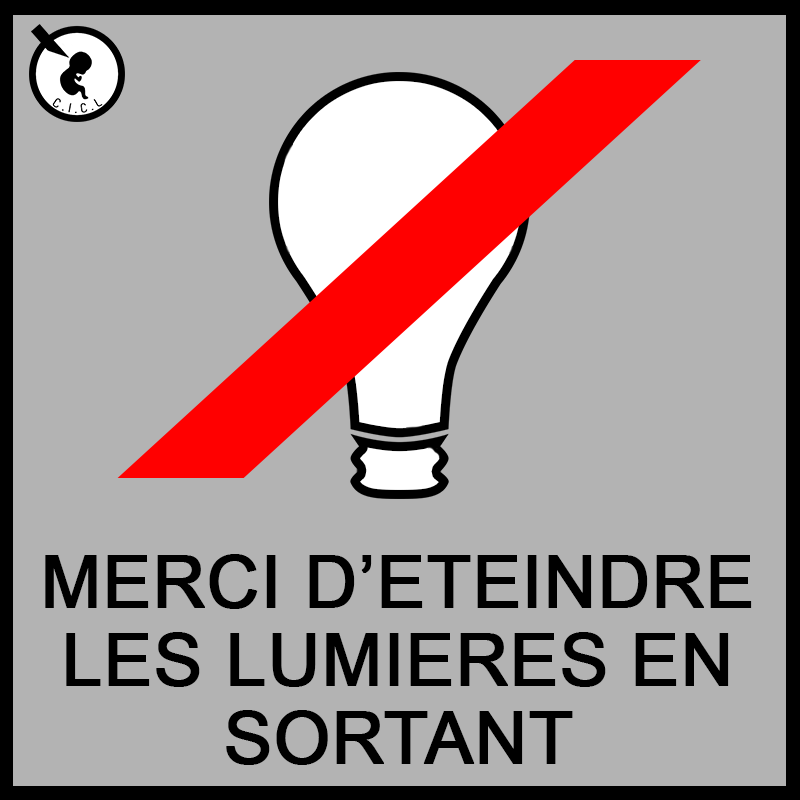
<style>
.page{position:relative;width:800px;height:800px;background:#b3b3b3}
.page>*{position:absolute;margin:0}
.t1{font:72px/78px "ArialMT";color:#000000;font-weight:bold}
</style>
<div class="page">
<p class="t1" style="left:45px;top:554px;width:707px;height:211px;text-align:center">MERCI D’ETEINDRE LES LUMIERES EN SORTANT</p>
</div>
